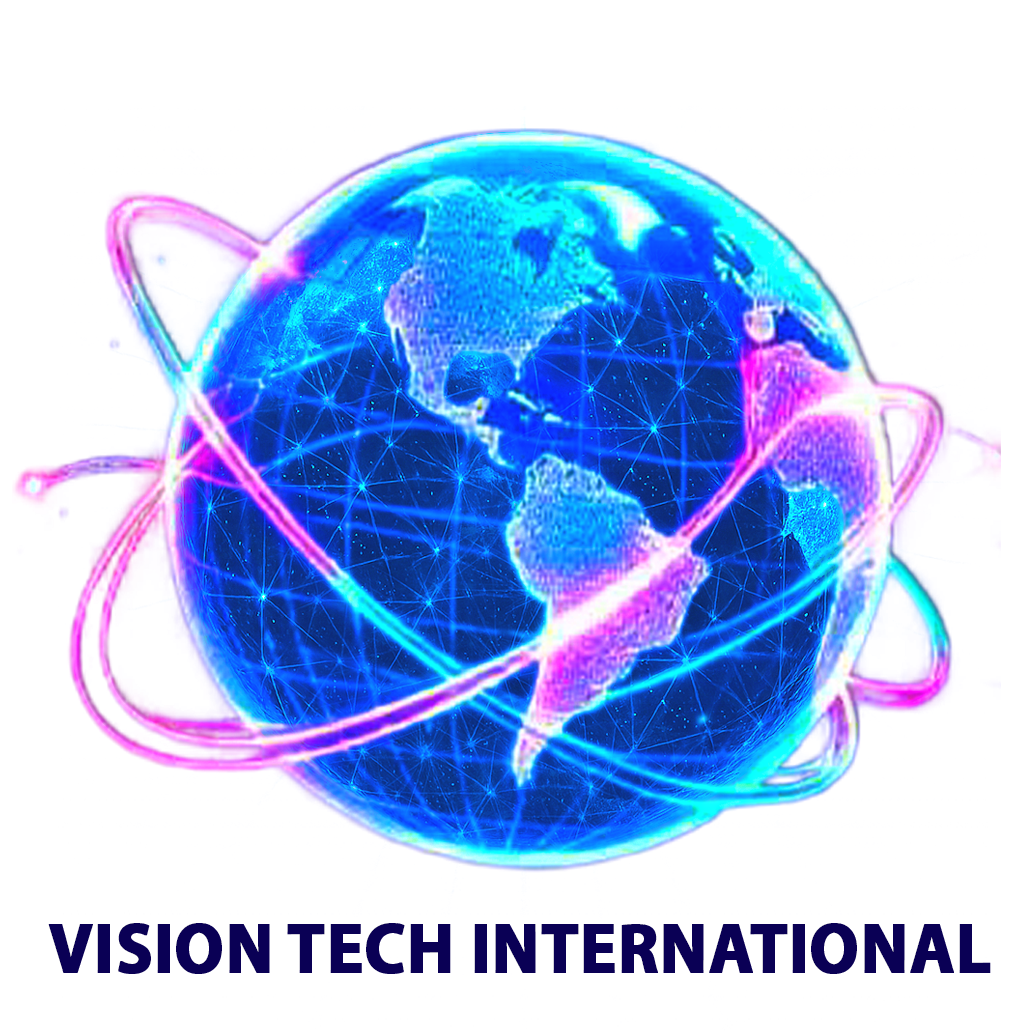
<style>
.page{position:relative;width:1024px;height:1032px;background:#ffffff}
.page>*{position:absolute;margin:0}
.t1{font:71.9px "MyriadPro-Bold";color:#0a0055;font-weight:bold;scale:0.95 1}
</style>
<div class="page">
<p class="t1" style="left:48px;top:923px;width:943px;height:51px">VISION TECH INTERNATIONAL</p>
</div>
